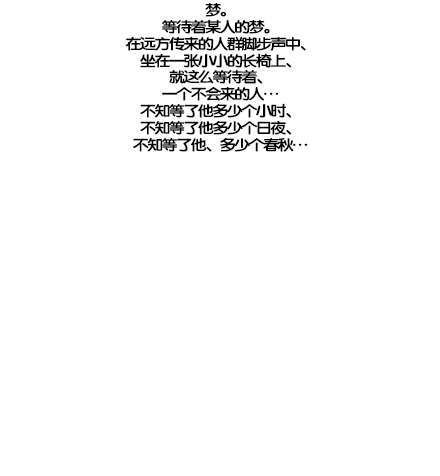
<style>
.page{position:relative;width:440px;height:476px;background:#ffffff}
.page>*{position:absolute;margin:0}
.t1{font:14.7px/16.8px "FZY4K--GBK1-0";letter-spacing:-0.13em;color:#000000;scale:1.14 1}
</style>
<div class="page">
<p class="t1" style="left:125px;top:3px;width:183px;height:149px;text-align:center">梦。<br>等待着某人的梦。<br>在远方传来的人群脚步声中、<br>坐在一张小小的长椅上、<br>就这么等待着、<br>一个不会来的人…<br>不知等了他多少个小时、<br>不知等了他多少个日夜、<br>不知等了他、多少个春秋…</p>
</div>
